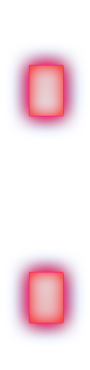
<style>
.page{position:relative;width:90px;height:370px;background:#ffffff}
.page>*{position:absolute;margin:0}
.t1{font:481.8px "EuroCaps";letter-spacing:0.025em;scale:0.76 1}
</style>
<div class="page">
<p class="t1" style="left:29px;top:65px;width:34px;height:258px">:</p>
<p class="t1" style="left:29px;top:65px;width:34px;height:258px">:</p>
</div>
